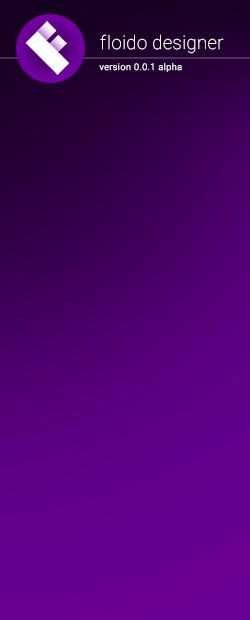
<style>
.page{position:relative;width:250px;height:620px}
.page>*{position:absolute;margin:0}
.t1{font:18.6px "Roboto-Thin";letter-spacing:0.02em;color:#ffffff}
.t2{font:18.6px "Roboto-Thin";letter-spacing:0.06em;color:#ffffff}
.t3{font:18.6px "Roboto-Thin";letter-spacing:0.04em;color:#ffffff}
.t4{font:8.9px "Roboto-Light";letter-spacing:0.06em;color:#ffffff}
</style>
<div class="page">
<p class="t1" style="left:100px;top:34px;width:124px;height:20px"><span class="t2">f</span><span class="t3">l</span>oido designer</p>
<p class="t4" style="left:99px;top:63px;width:83px;height:9px">version 0.0.1 alpha</p>
</div>
